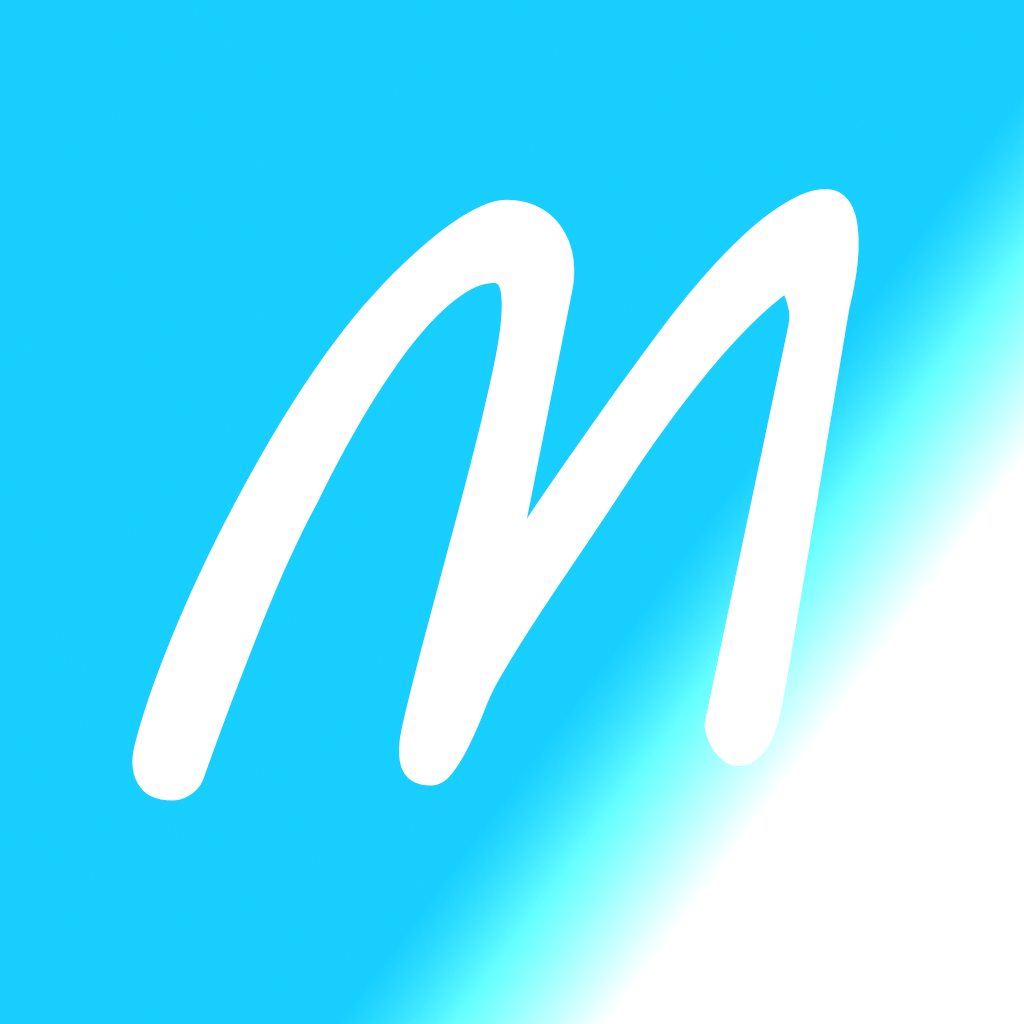
<style>
.page{position:relative;width:1024px;height:1024px;background:#18d0ff}
.page>*{position:absolute;margin:0}
.t1{font:809px "MVBoli";color:#ffffff}
</style>
<div class="page">
<p class="t1" style="left:132px;top:189px;width:727px;height:612px">M</p>
</div>
